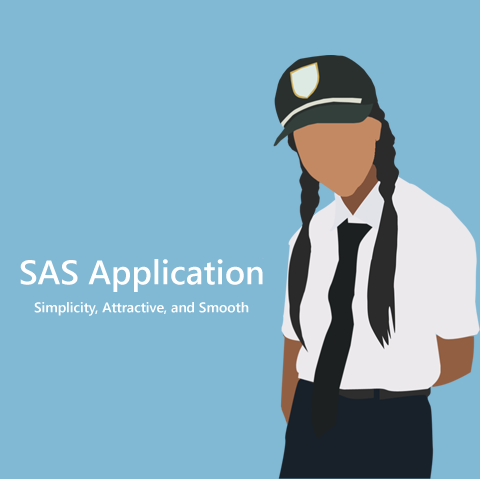
<style>
.page{position:relative;width:480px;height:479px;background:#81b8d4}
.page>*{position:absolute;margin:0}
.t1{font:34px "SegoeUI-Semibold";color:#ffffff}
.t2{font:14px "SegoeUI-Semibold";color:#ffffff}
</style>
<div class="page">
<p class="t1" style="left:20px;top:259px;width:243px;height:33px">SAS Application</p>
<p class="t2" style="left:34px;top:302px;width:215px;height:14px">Simplicity, Attractive, and Smooth</p>
</div>
